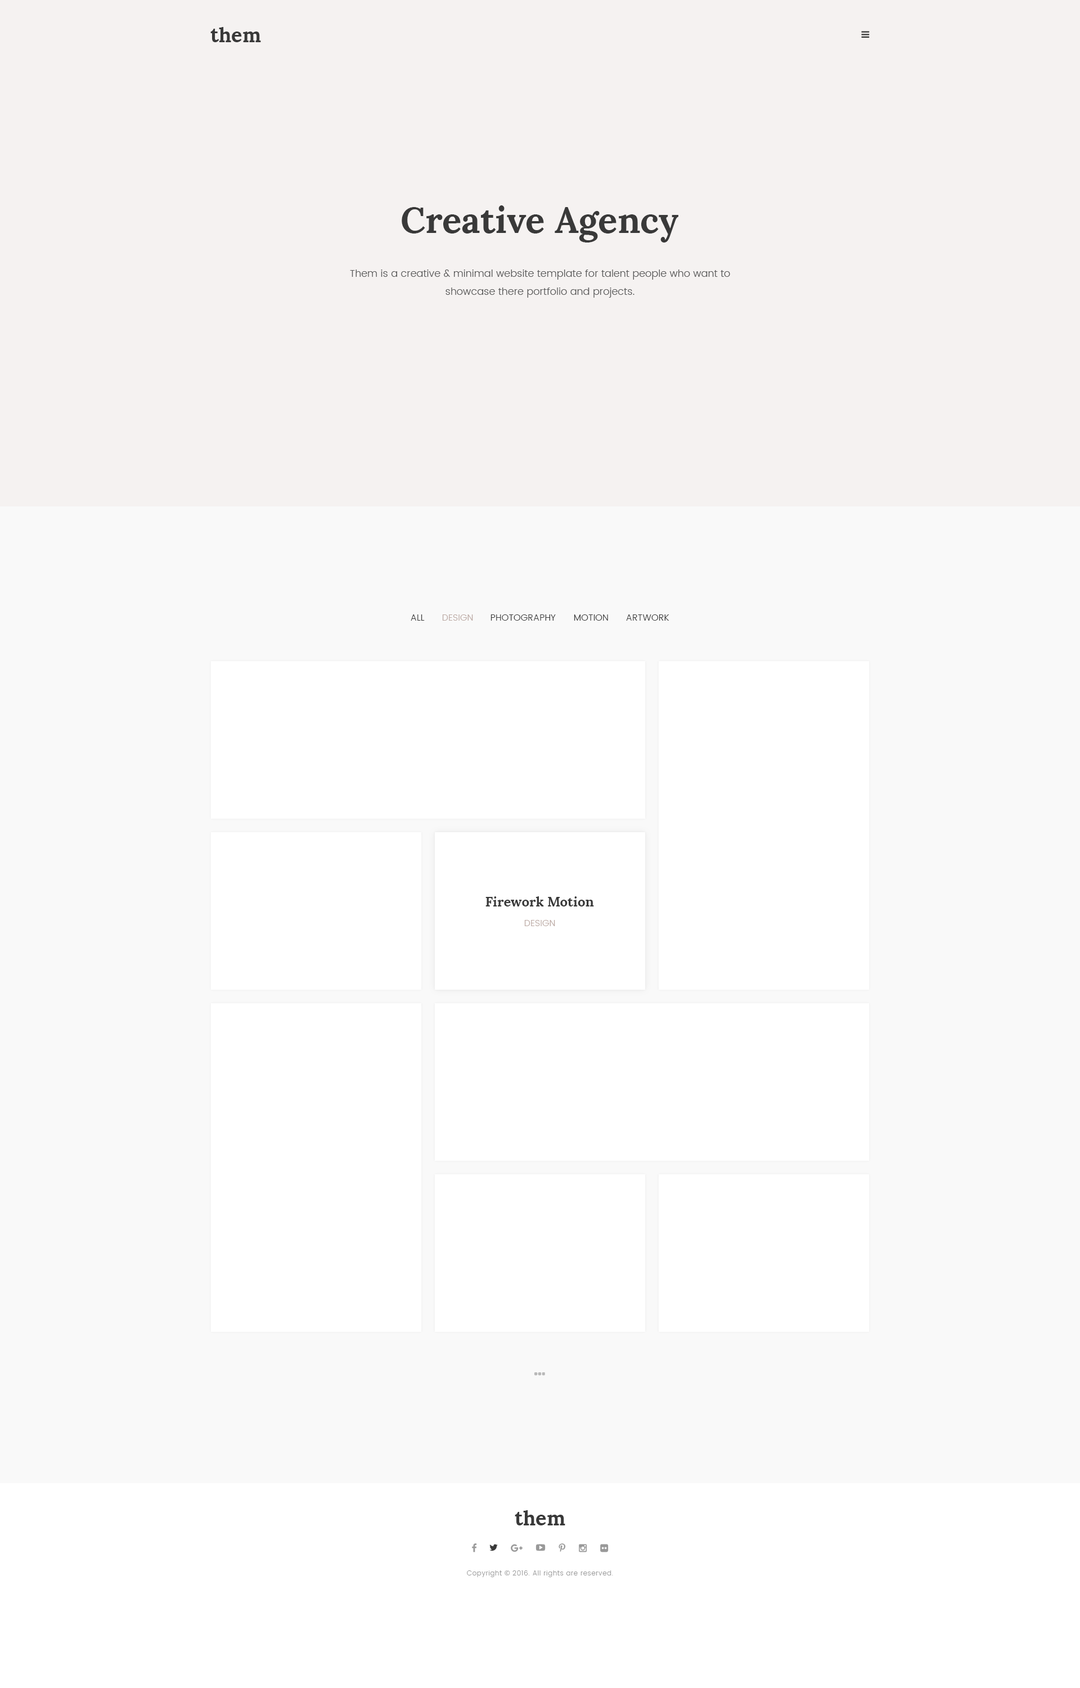
<style>
.page{position:relative;width:1080px;height:1688px;background:#f9f9f9}
.page>*{position:absolute;margin:0}
.t1{font:20.2px "Lora-Bold";color:#393939}
.t2{font:36px "Lora-Bold";color:#393939}
.t3{font:10.1px/18px "Poppins-Light";color:#595959}
.t4{font:9px "Poppins-Light";letter-spacing:0.01em;color:#393939;text-transform:uppercase}
.t5{font:9px "Poppins-Light";letter-spacing:0.01em;color:#bcaaa4;text-transform:uppercase}
.t6{font:13.5px "Lora-Bold";color:#393939}
.t7{font:6.8px "Poppins-Light";letter-spacing:0.05em;color:#999999}
.t8{font:6.8px "OpenSans";letter-spacing:0.05em;color:#999999}
</style>
<div class="page">
<p class="t1" style="left:210px;top:27px;width:51px;height:15px">them</p>
<p class="t2" style="left:402px;top:205px;width:276px;height:37px">Creative Agency</p>
<p class="t3" style="left:350px;top:269px;width:380px;height:29px;text-align:center">Them is a creative &amp; minimal website template for talent people who want to showcase there portfolio and projects.</p>
<p class="t4" style="left:411px;top:614px;width:14px;height:6px">All</p>
<p class="t5" style="left:442px;top:614px;width:31px;height:6px">Design</p>
<p class="t4" style="left:490px;top:614px;width:66px;height:6px">Photography</p>
<p class="t4" style="left:574px;top:614px;width:34px;height:6px">Motion</p>
<p class="t4" style="left:626px;top:614px;width:43px;height:6px">Artwork</p>
<p class="t6" style="left:485px;top:896px;width:109px;height:10px">Firework Motion</p>
<p class="t5" style="left:524px;top:920px;width:31px;height:6px">Design</p>
<p class="t1" style="left:515px;top:1510px;width:50px;height:15px">them</p>
<p class="t7" style="left:467px;top:1570px;width:146px;height:7px">Copyright <span class="t8">© </span>2016. All rights are reserved.</p>
</div>
